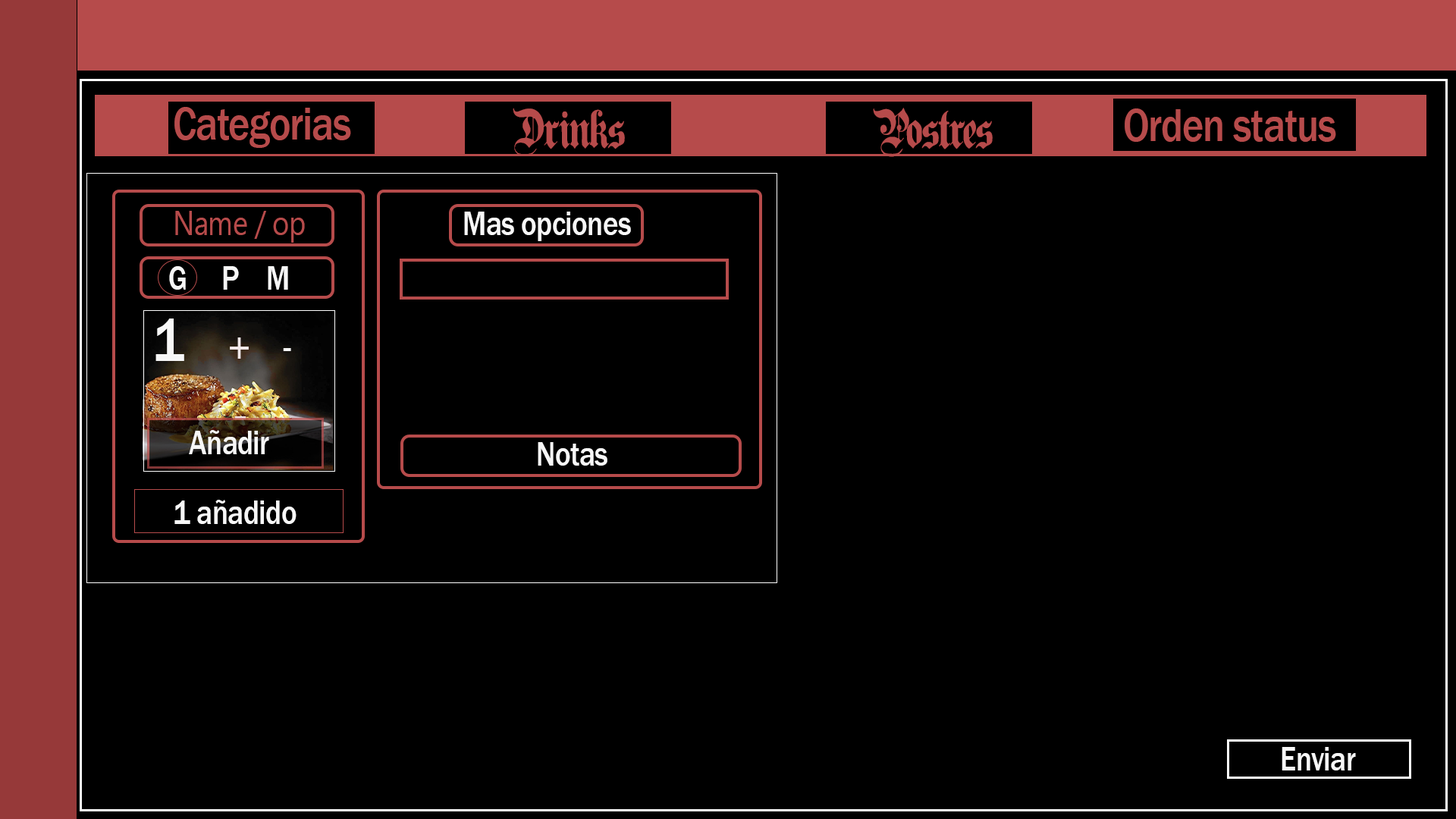
<style>
.page{position:relative;width:1456px;height:819px;background:#000000}
.page>*{position:absolute;margin:0}
.t1{font:47.4px "FranklinGothic-Medium";letter-spacing:-0.02em;color:#b64b4b;scale:0.86 1}
.t2{font:47.4px "PlainGermanica";letter-spacing:-0.02em;color:#b64b4b;scale:0.86 1}
.t3{font:33.8px "Gadugi";letter-spacing:-0.02em;color:#b64b4b;scale:0.86 1}
.t4{font:34.8px "FranklinGothic-Medium";letter-spacing:-0.02em;color:#f7f7f7;scale:0.86 1}
.t5{font:63.2px "FranklinGothic-Medium";letter-spacing:-0.02em;color:#f7f7f7;scale:0.86 1}
</style>
<div class="page">
<p class="t1" style="left:174px;top:107px;width:177px;height:41px">Categorias</p>
<p class="t2" style="left:513px;top:108px;width:112px;height:48px">Drinks</p>
<p class="t2" style="left:873px;top:108px;width:120px;height:49px">Postres</p>
<p class="t1" style="left:1125px;top:108px;width:211px;height:34px">Orden status</p>
<p class="t3" style="left:175px;top:211px;width:130px;height:32px">Name / op</p>
<p class="t4" style="left:464px;top:212px;width:167px;height:29px">Mas opciones</p>
<p class="t4" style="left:169px;top:266px;width:119px;height:24px">G     P    M</p>
<p class="t5" style="left:155px;top:318px;width:29px;height:43px">1</p>
<p class="t4" style="left:283px;top:348px;width:8px;height:3px">-</p>
<p class="t4" style="left:189px;top:430px;width:80px;height:24px">Añadir</p>
<p class="t4" style="left:538px;top:442px;width:69px;height:24px">Notas</p>
<p class="t4" style="left:174px;top:500px;width:123px;height:24px">1 añadido</p>
<p class="t4" style="left:1282px;top:747px;width:74px;height:23px">Enviar</p>
</div>
